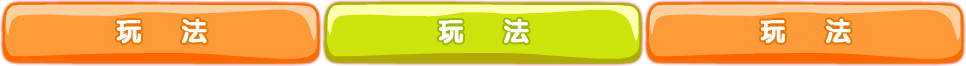
<style>
.page{position:relative;width:966px;height:66px;background:#fe9a38}
.page>*{position:absolute;margin:0}
.t1{font:26px "JCuYuan";letter-spacing:0.3em;color:#fefefe;font-weight:bold}
</style>
<div class="page">
<p class="t1" style="left:116px;top:18px;width:91px;height:26px">玩  法</p>
<p class="t1" style="left:438px;top:18px;width:91px;height:26px">玩  法</p>
<p class="t1" style="left:760px;top:18px;width:91px;height:26px">玩  法</p>
</div>
